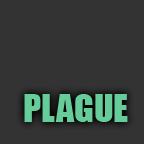
<style>
.page{position:relative;width:144px;height:144px;background:#333333}
.page>*{position:absolute;margin:0}
.t1{font:36px "Impact";color:#66cc99}
</style>
<div class="page">
<p class="t1" style="left:24px;top:94px;width:104px;height:28px">PLAGUE</p>
</div>
